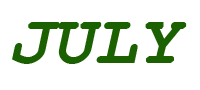
<style>
.page{position:relative;width:200px;height:90px;background:#ffffff}
.page>*{position:absolute;margin:0}
.t1{font:72px "CourierNewPS-BoldItalicMT";color:#1c6101}
</style>
<div class="page">
<p class="t1" style="left:12px;top:22px;width:175px;height:42px">JULY</p>
</div>
